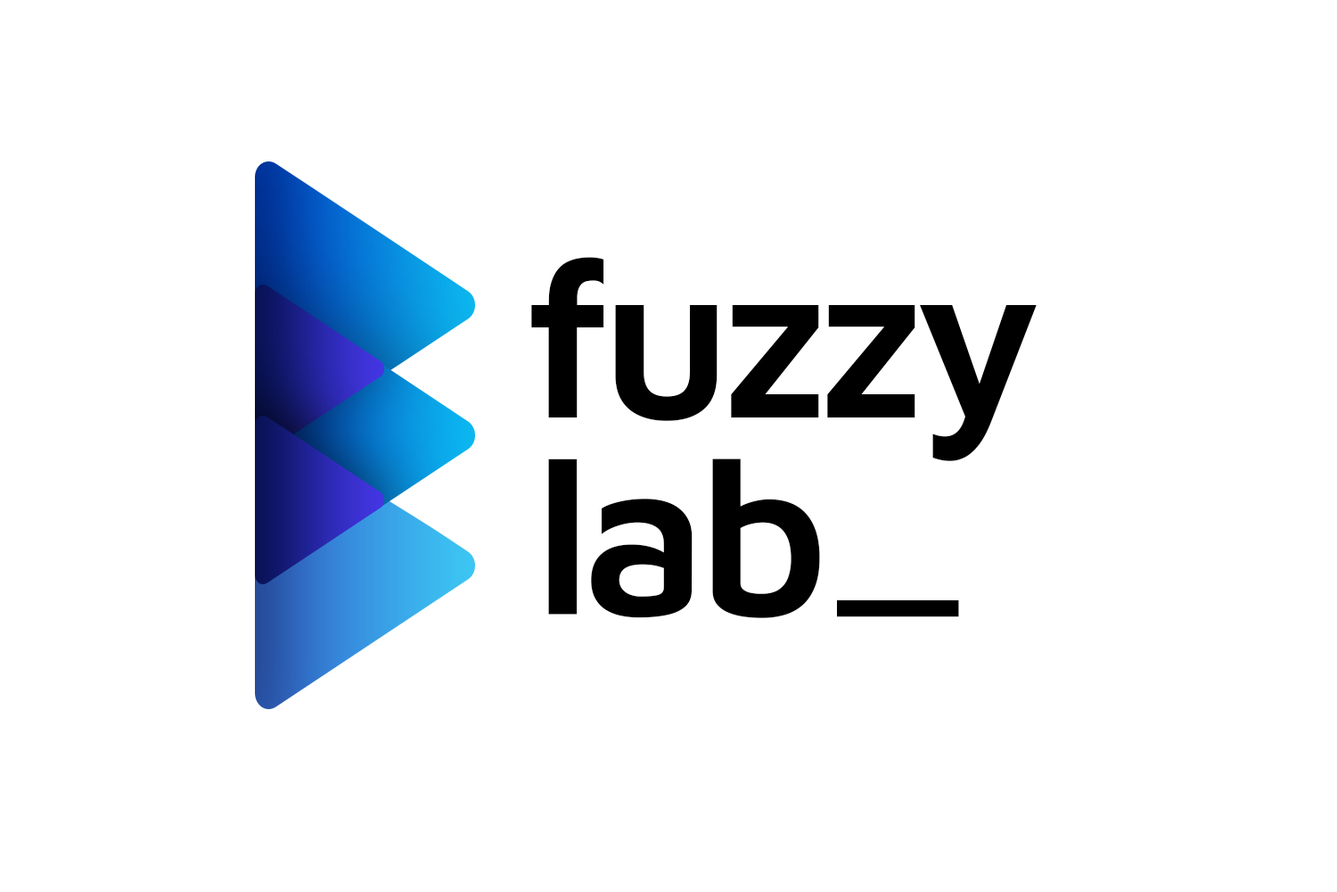
<style>
.page{position:relative;width:1337px;height:892px;background:#ffffff}
.page>*{position:absolute;margin:0}
.t1{font:222.9px "MavenPro-SemiBold";letter-spacing:-0.05em;color:#000000}
</style>
<div class="page">
<p class="t1" style="left:531px;top:257px;width:506px;height:204px">fuzzy</p>
<p class="t1" style="left:548px;top:458px;width:272px;height:160px">lab</p>
<p class="t1" style="left:837px;top:600px;width:122px;height:17px">_</p>
</div>
